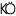
<style>
.page{position:relative;width:16px;height:16px;background:#ffffff}
.page>*{position:absolute;margin:0}
.t1{font:15px "SegoeUI-Light";color:#000000}
</style>
<div class="page">
<p class="t1" style="left:0px;top:3px;width:8px;height:11px">K</p>
<p class="t1" style="left:5px;top:1px;width:11px;height:14px">Ö</p>
</div>
